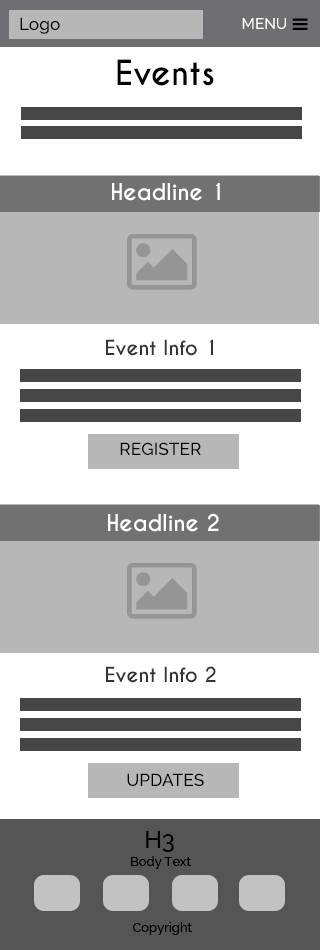
<style>
.page{position:relative;width:320px;height:950px;background:#ffffff}
.page>*{position:absolute;margin:0}
.t1{font:17.3px "Raleway-Medium";color:#000000}
.t2{font:15.2px "Raleway-Medium";color:#ffffff}
.t3{font:32.5px "CaviarDreams-Bold";color:#000000}
.t4{font:21.7px "CaviarDreams-Bold";color:#ffffff}
.t5{font:19.5px "CaviarDreams-Bold";color:#333333}
.t6{font:23.8px "Raleway-Medium";color:#000000}
.t7{font:13px "Raleway-Medium";color:#000000}
</style>
<div class="page">
<p class="t1" style="left:20px;top:17px;width:40px;height:17px">Logo</p>
<p class="t2" style="left:242px;top:18px;width:44px;height:11px">MENU</p>
<p class="t3" style="left:117px;top:59px;width:97px;height:27px">Events</p>
<p class="t4" style="left:112px;top:183px;width:108px;height:18px">Headline 1</p>
<p class="t5" style="left:106px;top:339px;width:107px;height:17px">Event Info 1</p>
<p class="t1" style="left:120px;top:442px;width:81px;height:13px">REGISTER</p>
<p class="t4" style="left:108px;top:513px;width:111px;height:19px">Headline 2</p>
<p class="t5" style="left:106px;top:666px;width:110px;height:17px">Event Info 2</p>
<p class="t1" style="left:127px;top:773px;width:77px;height:13px">UPDATES</p>
<p class="t6" style="left:146px;top:831px;width:28px;height:21px">H3</p>
<p class="t7" style="left:131px;top:856px;width:60px;height:13px">Body Text</p>
<p class="t7" style="left:132px;top:922px;width:60px;height:13px">Copyright</p>
</div>
